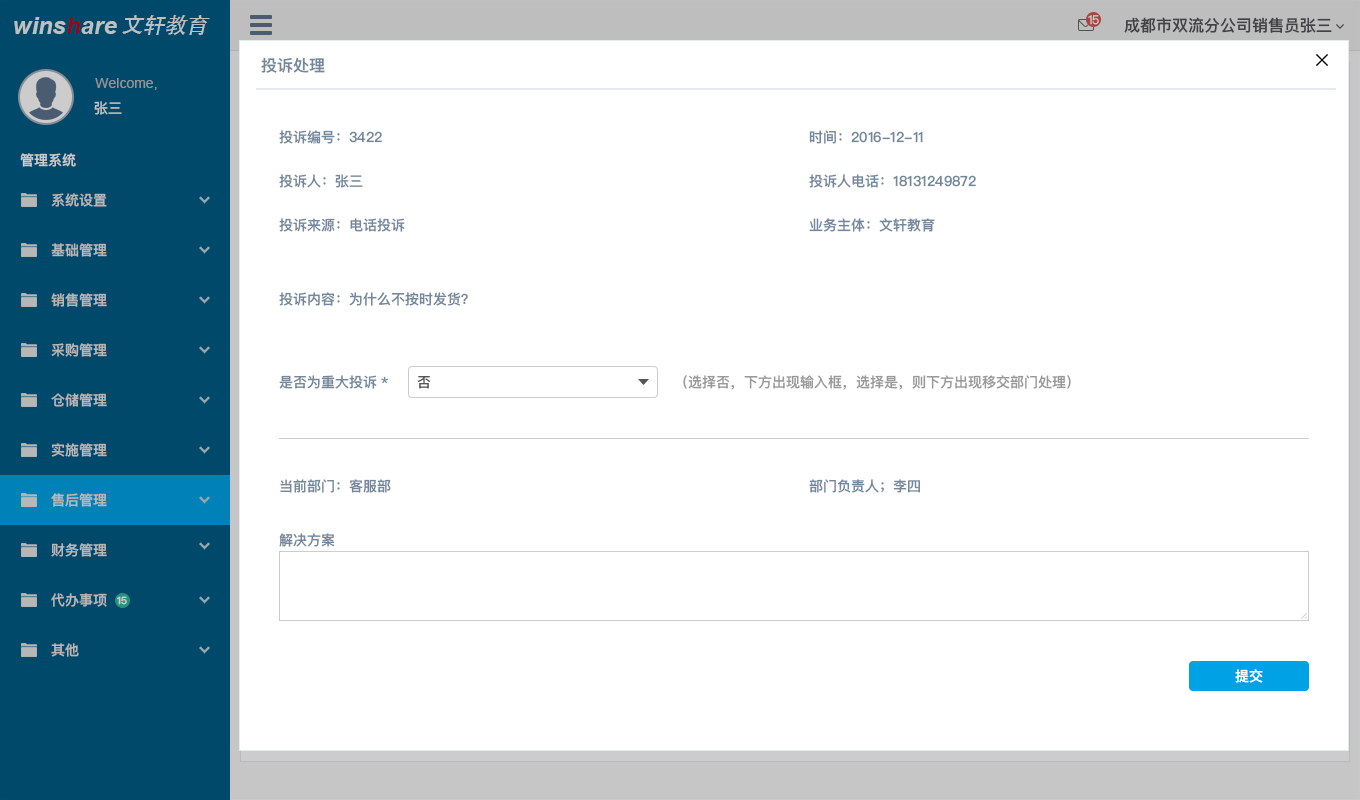
<style>
.page{position:relative;width:1360px;height:800px;background:#ffffff}
.page>*{position:absolute;margin:0}
.t1{font:24px "Arial-BoldItalicMT";color:#bdc0c1}
.t2{font:22px "STHeitiSC-Medium";color:#bdc0c1}
.t3{font:12px "PingFangSC-Regular";color:#cccccc}
.t4{font:16px "PingFangSC-Medium";color:#515356}
.t5{font:16px "PingFangSC-Medium";color:#74879b}
.t6{font:14px "ArialMT";color:#959393}
.t7{font:14px "PingFangSC-Medium";color:#bdc0c1}
.t8{font:14px "PingFangSC-Medium";color:#74879b}
.t9{font:14px "PingFangSC-Medium";color:#cccccc}
.t10{font:14px "PingFangSC-Medium";color:#b7b7b7}
.t11{font:14px "PingFangSC-Medium";color:#555555}
.t12{font:14px "PingFangSC-Medium";color:#999999}
.t13{font:10px "PingFangSC-Medium";color:#cccccc}
.t14{font:14px "PingFangSC-Medium";color:#ffffff}
</style>
<div class="page">
<p class="t1" style="left:14px;top:17px;width:103px;height:17px">winshare</p>
<p class="t2" style="left:122px;top:15px;width:88px;height:20px">文轩教育</p>
<p class="t3" style="left:1088px;top:15px;width:11px;height:10px">15</p>
<p class="t4" style="left:1124px;top:17px;width:208px;height:16px">成都市双流分公司销售员张三</p>
<p class="t5" style="left:261px;top:57px;width:64px;height:16px">投诉处理</p>
<p class="t6" style="left:95px;top:78px;width:62px;height:12px">Welcome,</p>
<p class="t7" style="left:94px;top:101px;width:28px;height:14px">张三</p>
<p class="t8" style="left:279px;top:130px;width:103px;height:14px">投诉编号：3422</p>
<p class="t8" style="left:809px;top:130px;width:114px;height:14px">时间：2016-12-11</p>
<p class="t9" style="left:20px;top:153px;width:56px;height:14px">管理系统</p>
<p class="t8" style="left:279px;top:174px;width:84px;height:14px">投诉人：张三</p>
<p class="t8" style="left:809px;top:174px;width:167px;height:14px">投诉人电话：18131249872</p>
<p class="t10" style="left:51px;top:193px;width:56px;height:14px">系统设置</p>
<p class="t8" style="left:279px;top:218px;width:126px;height:14px">投诉来源：电话投诉</p>
<p class="t8" style="left:809px;top:218px;width:126px;height:14px">业务主体：文轩教育</p>
<p class="t10" style="left:51px;top:243px;width:56px;height:14px">基础管理</p>
<p class="t10" style="left:51px;top:293px;width:56px;height:14px">销售管理</p>
<p class="t8" style="left:279px;top:292px;width:189px;height:14px">投诉内容：为什么不按时发货？</p>
<p class="t10" style="left:51px;top:343px;width:56px;height:14px">采购管理</p>
<p class="t8" style="left:279px;top:375px;width:109px;height:14px">是否为重大投诉*</p>
<p class="t11" style="left:417px;top:376px;width:14px;height:13px">否</p>
<p class="t12" style="left:683px;top:375px;width:388px;height:15px">（选择否，下方出现输入框，选择是，则下方出现移交部门处理）</p>
<p class="t10" style="left:51px;top:393px;width:56px;height:14px">仓储管理</p>
<p class="t10" style="left:51px;top:443px;width:56px;height:14px">实施管理</p>
<p class="t8" style="left:280px;top:479px;width:111px;height:14px">当前部门：客服部</p>
<p class="t8" style="left:809px;top:479px;width:111px;height:14px">部门负责人；李四</p>
<p class="t10" style="left:51px;top:493px;width:56px;height:14px">售后管理</p>
<p class="t8" style="left:279px;top:533px;width:56px;height:14px">解决方案</p>
<p class="t10" style="left:51px;top:543px;width:56px;height:14px">财务管理</p>
<p class="t10" style="left:51px;top:593px;width:56px;height:14px">代办事项</p>
<p class="t13" style="left:117px;top:596px;width:10px;height:9px">15</p>
<p class="t10" style="left:51px;top:643px;width:28px;height:14px">其他</p>
<p class="t14" style="left:1235px;top:669px;width:28px;height:14px">提交</p>
</div>
